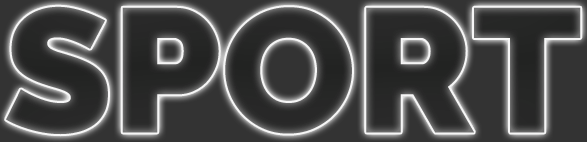
<style>
.page{position:relative;width:587px;height:142px}
.page>*{position:absolute;margin:0}
.t1{font:175.2px "Raleway-Black";color:#2a2a2a}
</style>
<div class="page">
<p class="t1" style="left:6px;top:6px;width:575px;height:129px">SPORT</p>
</div>
